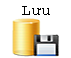
<style>
.page{position:relative;width:71px;height:58px;background:#ffffff}
.page>*{position:absolute;margin:0}
.t1{font:12px "CourierNewPSMT";color:#000000}
</style>
<div class="page">
<p class="t1" style="left:22px;top:6px;width:28px;height:9px">Lưu</p>
</div>
